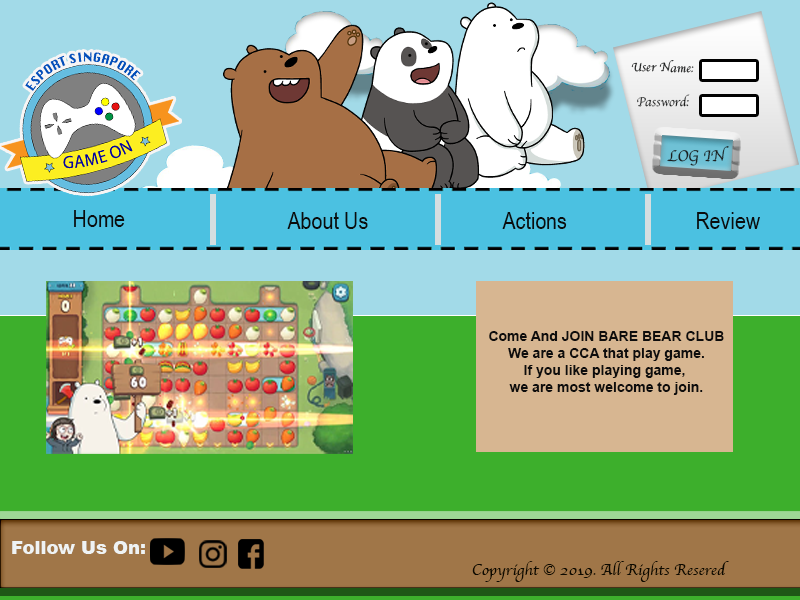
<style>
.page{position:relative;width:800px;height:600px}
.page>*{position:absolute;margin:0}
.t1{font:12.4px "Apple-Chancery";color:#1c1e1e}
.t2{font:12.9px "Apple-Chancery";color:#1c1e1e}
.t3{font:16px "Apple-Chancery";color:#1c1e1e}
.t4{font:24px "ArialNarrow";color:#0b0c0c}
.t5{font:14px "Arial-BoldMT";color:#0e0d0d}
.t6{font:18px "Arial-Black";color:#eff3f4}
.t7{font:16px "Apple-Chancery";color:#0c0901}
</style>
<div class="page">
<p class="t1" style="left:631px;top:60px;width:63px;height:13px;rotate:1deg">User Name:</p>
<p class="t2" style="left:637px;top:94px;width:53px;height:13px">Password:</p>
<p class="t3" style="left:667px;top:146px;width:62px;height:20px;rotate:-1deg">LOG IN</p>
<p class="t4" style="left:74px;top:210px;width:51px;height:17px">Home</p>
<p class="t4" style="left:287px;top:212px;width:81px;height:17px">About Us</p>
<p class="t4" style="left:502px;top:212px;width:65px;height:17px">Actions</p>
<p class="t4" style="left:697px;top:212px;width:63px;height:17px">Review</p>
<p class="t5" style="left:489px;top:331px;width:235px;height:64px;text-align:center">Come And JOIN BARE BEAR CLUB<br>We are a CCA that play game.<br>If you like playing game, <br>we are most welcome to join.</p>
<p class="t6" style="left:12px;top:541px;width:133px;height:13px">Follow Us On:</p>
<p class="t7" style="left:472px;top:561px;width:257px;height:21px">Copyright © 2019. All Rights Resered</p>
</div>
